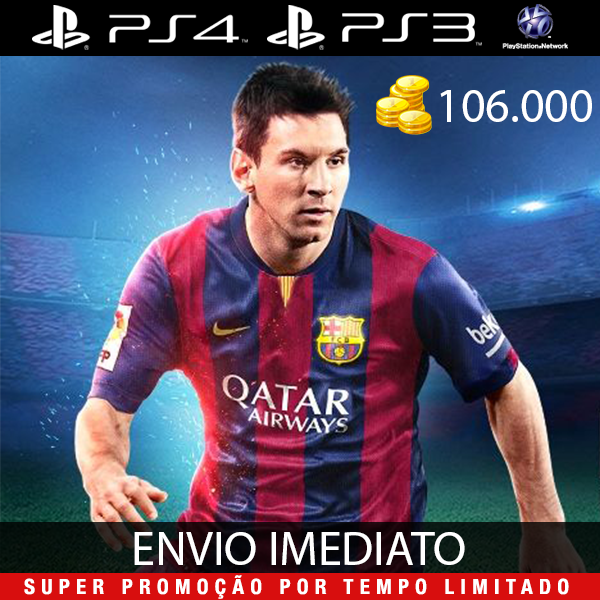
<style>
.page{position:relative;width:600px;height:600px}
.page>*{position:absolute;margin:0}
.t1{font:48px "MyriadPro-Regular";color:#ffffff}
.t2{font:21px "HelveticaNeue-CondensedBold";letter-spacing:0.3em;color:#ffffff}
</style>
<div class="page">
<p class="t1" style="left:440px;top:90px;width:152px;height:32px">106.000</p>
<p class="t1" style="left:134px;top:532px;width:331px;height:33px">ENVIO IMEDIATO</p>
<p class="t2" style="left:24px;top:575px;width:545px;height:24px">SUPER PROMOÇÃO POR TEMPO LIMITADO</p>
</div>
